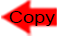
<style>
.page{position:relative;width:59px;height:36px;background:#ffffff}
.page>*{position:absolute;margin:0}
.t1{font:17px "ArialMT";color:#000000;scale:1.17 1}
</style>
<div class="page">
<p class="t1" style="left:9px;top:11px;width:46px;height:15px">Copy</p>
</div>
